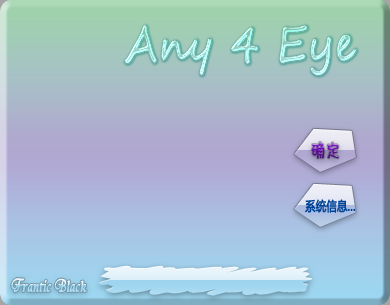
<style>
.page{position:relative;width:390px;height:305px}
.page>*{position:absolute;margin:0}
.t1{font:49.8px "SegoeScript";font-weight:bold;scale:0.79 1}
.t2{font:18.3px "FZKATJW--GB1-0";font-weight:bold;scale:0.79 1}
.t3{font:13.1px "MicrosoftYaHei";color:#004497;font-weight:bold;scale:0.79 1}
.t4{font:19.6px "TirantiSolidLetPlain";color:#aadbf2;font-weight:bold;scale:0.79 1}
</style>
<div class="page">
<p class="t1" style="left:124px;top:24px;width:233px;height:52px">Any 4 Eye</p>
<p class="t2" style="left:311px;top:141px;width:28px;height:18px">确定</p>
<p class="t3" style="left:305px;top:199px;width:51px;height:14px">系统信息...</p>
<p class="t4" style="left:11px;top:278px;width:76px;height:15px">Frantic Black</p>
</div>
